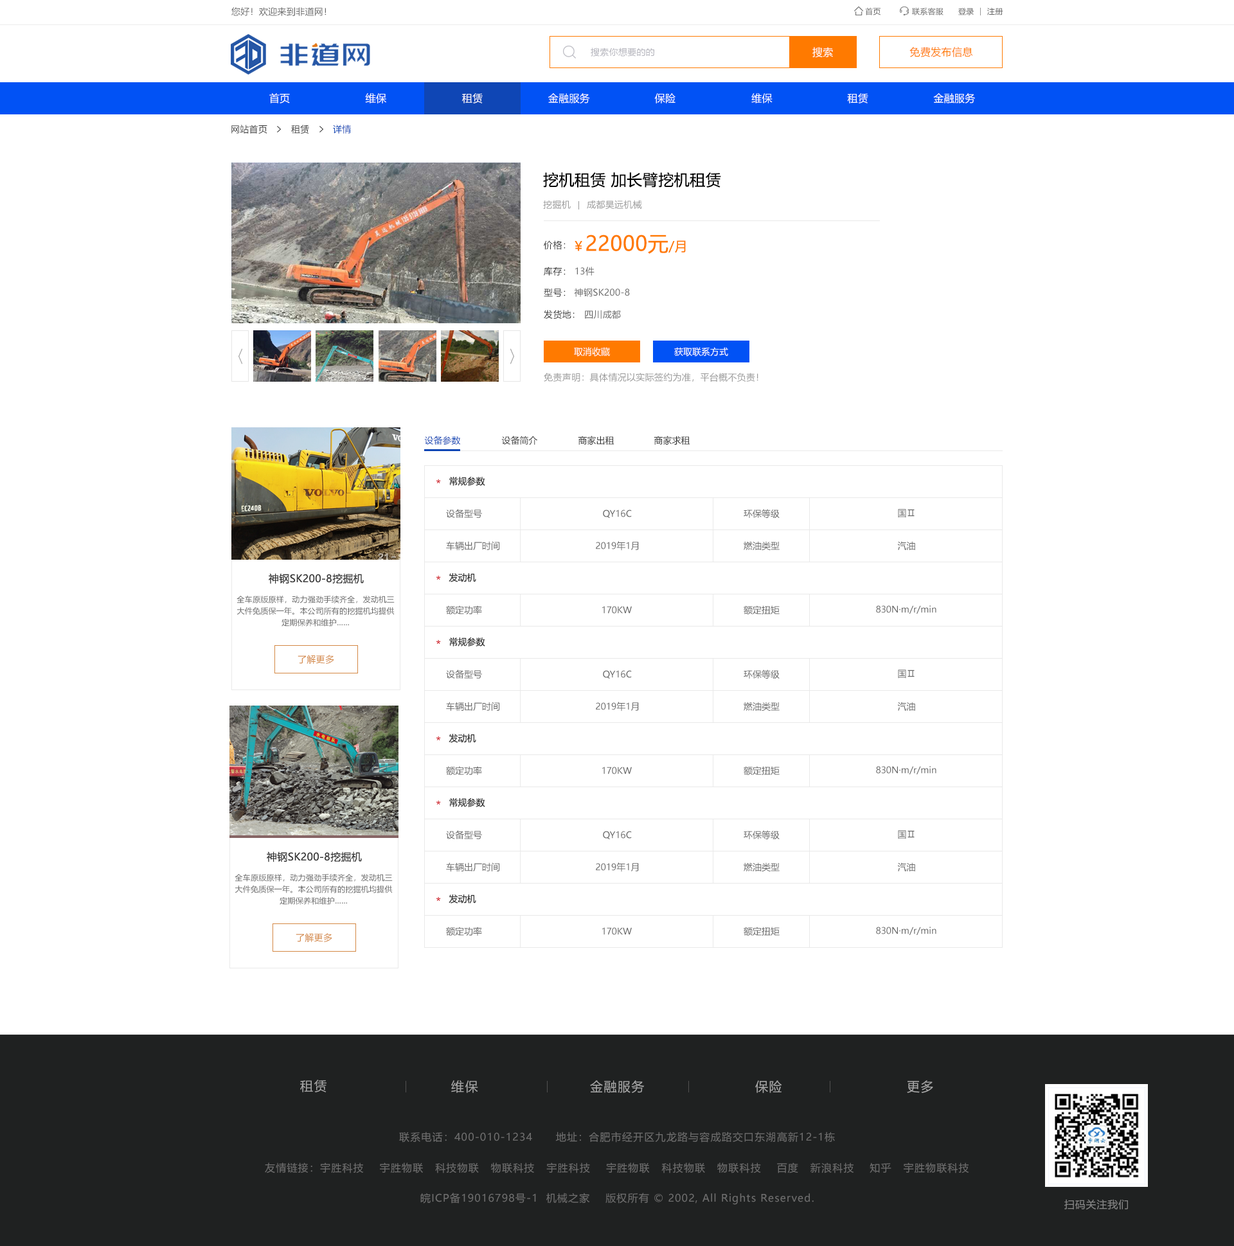
<style>
.page{position:relative;width:1234px;height:1246px;background:#ffffff}
.page>*{position:absolute;margin:0}
.t1{font:9px "MicrosoftYaHei";letter-spacing:0.022em;color:#666666}
.t2{font:7.7px "MicrosoftYaHei";letter-spacing:0.022em;color:#666666}
.t3{font:9px "MicrosoftYaHei";letter-spacing:0.022em;color:#b4b4bc}
.t4{font:10.3px "MicrosoftYaHei";letter-spacing:0.022em;color:#fefefe}
.t5{font:10.3px "MicrosoftYaHei";letter-spacing:0.022em;color:#ff7a00}
.t6{font:10.3px "MicrosoftYaHei";letter-spacing:0.022em;color:#ffffff}
.t7{font:9px "MicrosoftYaHei";letter-spacing:0.022em;color:#333333}
.t8{font:9px "MicrosoftYaHei";letter-spacing:0.022em;color:#0f46b5}
.t9{font:15.4px "MicrosoftYaHei";letter-spacing:0.022em;color:#000000}
.t10{font:9px "MicrosoftYaHei";letter-spacing:0.022em;color:#999999}
.t11{font:20.6px "MicrosoftYaHei";letter-spacing:0.022em;color:#ff7a00}
.t12{font:12.9px "MicrosoftYaHei";letter-spacing:0.022em;color:#ff7a00}
.t13{font:9px "MicrosoftYaHei";color:#ffffff}
.t14{font:9px "MicrosoftYaHei";color:#0f46b5}
.t15{font:9px "MicrosoftYaHei";color:#333333}
.t16{font:9px "MicrosoftYaHei";color:#666666}
.t17{font:10.3px "MicrosoftYaHei";letter-spacing:0.022em;color:#333333}
.t18{font:7.7px/11.6px "MicrosoftYaHei";letter-spacing:0.022em;color:#666666}
.t19{font:9px "MicrosoftYaHei";letter-spacing:0.022em;color:#d48844}
.t20{font:12.9px "MicrosoftYaHei";letter-spacing:0.075em;color:#a7a7a7}
.t21{font:10.3px "MicrosoftYaHei";letter-spacing:0.075em;color:#6e6e6e}
.t22{font:10.3px "MicrosoftYaHei";letter-spacing:0.05em;color:#888888}
</style>
<div class="page">
<p class="t1" style="left:231px;top:7px;width:96px;height:9px">您好！欢迎来到非道网！</p>
<p class="t2" style="left:865px;top:8px;width:16px;height:7px">首页</p>
<p class="t2" style="left:912px;top:8px;width:32px;height:7px">联系客服</p>
<p class="t2" style="left:959px;top:8px;width:15px;height:7px">登录</p>
<p class="t2" style="left:987px;top:8px;width:17px;height:7px">注册</p>
<p class="t3" style="left:591px;top:48px;width:63px;height:9px">搜索你想要的的</p>
<p class="t4" style="left:813px;top:47px;width:20px;height:11px">搜索</p>
<p class="t5" style="left:910px;top:47px;width:63px;height:10px">免费发布信息</p>
<p class="t6" style="left:269px;top:93px;width:21px;height:11px">首页</p>
<p class="t6" style="left:365px;top:93px;width:21px;height:11px">维保</p>
<p class="t6" style="left:462px;top:93px;width:21px;height:11px">租赁</p>
<p class="t6" style="left:548px;top:93px;width:42px;height:11px">金融服务</p>
<p class="t6" style="left:654px;top:93px;width:22px;height:11px">保险</p>
<p class="t6" style="left:752px;top:93px;width:21px;height:11px">维保</p>
<p class="t6" style="left:847px;top:93px;width:22px;height:11px">租赁</p>
<p class="t6" style="left:933px;top:93px;width:42px;height:11px">金融服务</p>
<p class="t7" style="left:231px;top:125px;width:36px;height:9px">网站首页</p>
<p class="t7" style="left:291px;top:125px;width:18px;height:9px">租赁</p>
<p class="t8" style="left:333px;top:125px;width:18px;height:9px">详情</p>
<p class="t9" style="left:543px;top:172px;width:178px;height:16px">挖机租赁 加长臂挖机租赁</p>
<p class="t10" style="left:543px;top:200px;width:28px;height:10px">挖掘机</p>
<p class="t10" style="left:587px;top:200px;width:55px;height:10px">成都昊远机械</p>
<p class="t7" style="left:544px;top:240px;width:22px;height:10px">价格：</p>
<p class="t11" style="left:575px;top:235px;width:111px;height:19px"><span class="t12">￥</span>22000元<span class="t12">/月</span></p>
<p class="t7" style="left:544px;top:267px;width:22px;height:9px">库存：</p>
<p class="t1" style="left:575px;top:267px;width:20px;height:9px">13件</p>
<p class="t7" style="left:544px;top:289px;width:22px;height:8px">型号：</p>
<p class="t1" style="left:574px;top:288px;width:56px;height:9px">神钢SK200-8</p>
<p class="t7" style="left:544px;top:310px;width:31px;height:10px">发货地：</p>
<p class="t1" style="left:585px;top:310px;width:36px;height:9px">四川成都</p>
<p class="t13" style="left:574px;top:347px;width:36px;height:10px">取消收藏</p>
<p class="t13" style="left:674px;top:347px;width:54px;height:10px">获取联系方式</p>
<p class="t10" style="left:544px;top:373px;width:215px;height:9px">免责声明：具体情况以实际签约为准，平台概不负责！</p>
<p class="t14" style="left:424px;top:436px;width:37px;height:10px">设备参数</p>
<p class="t15" style="left:501px;top:436px;width:36px;height:10px">设备简介</p>
<p class="t15" style="left:578px;top:436px;width:37px;height:9px">商家出租</p>
<p class="t15" style="left:654px;top:436px;width:36px;height:9px">商家求租</p>
<p class="t15" style="left:449px;top:476px;width:36px;height:10px">常规参数</p>
<p class="t16" style="left:446px;top:509px;width:36px;height:9px">设备型号</p>
<p class="t16" style="left:603px;top:510px;width:29px;height:8px">QY16C</p>
<p class="t16" style="left:744px;top:509px;width:36px;height:10px">环保等级</p>
<p class="t16" style="left:898px;top:509px;width:17px;height:9px">国Ⅱ</p>
<p class="t16" style="left:446px;top:541px;width:54px;height:10px">车辆出厂时间</p>
<p class="t16" style="left:596px;top:541px;width:43px;height:10px">2019年1月</p>
<p class="t16" style="left:744px;top:541px;width:36px;height:10px">燃油类型</p>
<p class="t16" style="left:897px;top:541px;width:18px;height:9px">汽油</p>
<p class="t17" style="left:269px;top:573px;width:95px;height:11px">神钢SK200-8挖掘机</p>
<p class="t15" style="left:449px;top:573px;width:27px;height:9px">发动机</p>
<p class="t18" style="left:237px;top:596px;width:158px;height:31px;text-align:center">全车原版原样，动力强劲手续齐全，发动机三<br>大件免质保一年。本公司所有的挖掘机均提供<br>定期保养和维护……</p>
<p class="t16" style="left:446px;top:606px;width:36px;height:9px">额定功率</p>
<p class="t16" style="left:744px;top:606px;width:36px;height:9px">额定扭矩</p>
<p class="t16" style="left:876px;top:606px;width:61px;height:8px">830N·m/r/min</p>
<p class="t16" style="left:602px;top:606px;width:30px;height:8px">170KW</p>
<p class="t15" style="left:449px;top:637px;width:36px;height:10px">常规参数</p>
<p class="t19" style="left:298px;top:655px;width:36px;height:9px">了解更多</p>
<p class="t16" style="left:446px;top:670px;width:36px;height:9px">设备型号</p>
<p class="t16" style="left:603px;top:670px;width:29px;height:9px">QY16C</p>
<p class="t16" style="left:744px;top:670px;width:36px;height:10px">环保等级</p>
<p class="t16" style="left:898px;top:670px;width:17px;height:9px">国Ⅱ</p>
<p class="t16" style="left:446px;top:702px;width:54px;height:10px">车辆出厂时间</p>
<p class="t16" style="left:596px;top:702px;width:43px;height:10px">2019年1月</p>
<p class="t16" style="left:744px;top:702px;width:36px;height:10px">燃油类型</p>
<p class="t16" style="left:897px;top:702px;width:18px;height:9px">汽油</p>
<p class="t15" style="left:449px;top:734px;width:27px;height:9px">发动机</p>
<p class="t16" style="left:446px;top:766px;width:36px;height:10px">额定功率</p>
<p class="t16" style="left:602px;top:767px;width:30px;height:8px">170KW</p>
<p class="t16" style="left:744px;top:766px;width:36px;height:10px">额定扭矩</p>
<p class="t16" style="left:876px;top:766px;width:61px;height:9px">830N·m/r/min</p>
<p class="t15" style="left:449px;top:798px;width:36px;height:9px">常规参数</p>
<p class="t16" style="left:446px;top:831px;width:36px;height:9px">设备型号</p>
<p class="t16" style="left:603px;top:831px;width:29px;height:9px">QY16C</p>
<p class="t16" style="left:744px;top:831px;width:36px;height:9px">环保等级</p>
<p class="t16" style="left:898px;top:831px;width:17px;height:9px">国Ⅱ</p>
<p class="t17" style="left:267px;top:852px;width:95px;height:11px">神钢SK200-8挖掘机</p>
<p class="t16" style="left:446px;top:863px;width:54px;height:9px">车辆出厂时间</p>
<p class="t16" style="left:596px;top:863px;width:43px;height:9px">2019年1月</p>
<p class="t16" style="left:744px;top:863px;width:36px;height:9px">燃油类型</p>
<p class="t16" style="left:897px;top:863px;width:18px;height:9px">汽油</p>
<p class="t18" style="left:235px;top:874px;width:158px;height:31px;text-align:center">全车原版原样，动力强劲手续齐全，发动机三<br>大件免质保一年。本公司所有的挖掘机均提供<br>定期保养和维护……</p>
<p class="t15" style="left:449px;top:895px;width:27px;height:9px">发动机</p>
<p class="t16" style="left:446px;top:927px;width:36px;height:10px">额定功率</p>
<p class="t16" style="left:602px;top:928px;width:30px;height:7px">170KW</p>
<p class="t16" style="left:744px;top:927px;width:36px;height:10px">额定扭矩</p>
<p class="t16" style="left:876px;top:927px;width:61px;height:8px">830N·m/r/min</p>
<p class="t19" style="left:296px;top:933px;width:36px;height:9px">了解更多</p>
<p class="t20" style="left:300px;top:1080px;width:27px;height:13px">租赁</p>
<p class="t20" style="left:451px;top:1081px;width:27px;height:13px">维保</p>
<p class="t20" style="left:590px;top:1081px;width:55px;height:13px">金融服务</p>
<p class="t20" style="left:755px;top:1081px;width:27px;height:13px">保险</p>
<p class="t20" style="left:907px;top:1081px;width:26px;height:13px">更多</p>
<p class="t21" style="left:399px;top:1132px;width:436px;height:11px">联系电话：400-010-1234      地址：合肥市经开区九龙路与容成路交口东湖高新12-1栋</p>
<p class="t21" style="left:265px;top:1163px;width:704px;height:11px">友情链接：宇胜科技    宇胜物联   科技物联   物联科技   宇胜科技    宇胜物联   科技物联   物联科技    百度   新浪科技    知乎   宇胜物联科技</p>
<p class="t21" style="left:420px;top:1193px;width:394px;height:12px">皖ICP备19016798号-1  机械之家    版权所有 © 2002, All Rights Reserved.</p>
<p class="t22" style="left:1065px;top:1200px;width:63px;height:10px">扫码关注我们</p>
</div>
